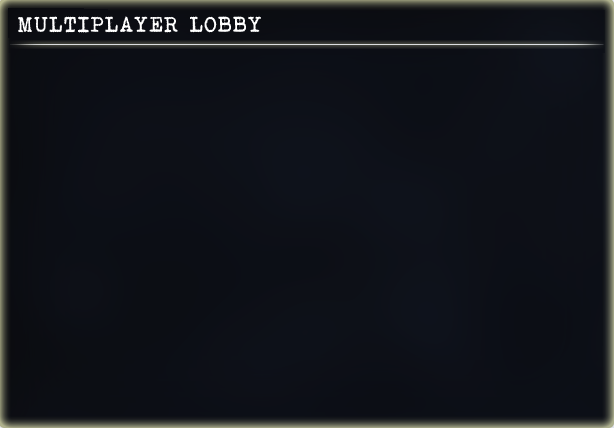
<style>
.page{position:relative;width:614px;height:428px}
.page>*{position:absolute;margin:0}
.t1{font:21.9px "Bohemian-typewriter";color:#ffffff}
</style>
<div class="page">
<p class="t1" style="left:18px;top:16px;width:243px;height:17px">MULTIPLAYER LOBBY</p>
</div>
